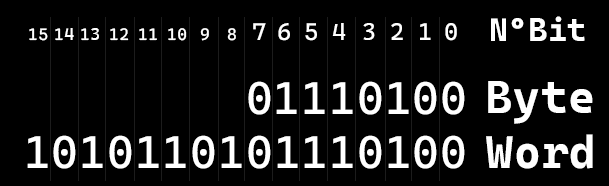
<style>
.page{position:relative;width:609px;height:186px;background:#000000}
.page>*{position:absolute;margin:0}
.t1{font:32.5px "CascadiaCodeRoman-Bold";letter-spacing:0.02em;color:#ffffff}
.t2{font:16.7px "CascadiaCode-Roman";letter-spacing:0.02em;color:#ffffff}
.t3{font:24.2px "CascadiaCode-Roman";letter-spacing:0.02em;color:#ffffff}
.t4{font:45.8px "CascadiaCode-Roman";letter-spacing:0.02em;color:#ffffff}
.t5{font:45.8px "CascadiaCodeRoman-Bold";letter-spacing:0.02em;color:#ffffff}
</style>
<div class="page">
<p class="t1" style="left:491px;top:16px;width:94px;height:25px">NºBit</p>
<p class="t2" style="left:29px;top:28px;width:19px;height:13px">15</p>
<p class="t2" style="left:55px;top:28px;width:19px;height:13px">14</p>
<p class="t2" style="left:81px;top:28px;width:18px;height:13px">13</p>
<p class="t2" style="left:110px;top:28px;width:19px;height:13px">12</p>
<p class="t2" style="left:139px;top:28px;width:18px;height:13px">11</p>
<p class="t2" style="left:168px;top:28px;width:19px;height:13px">10</p>
<p class="t2" style="left:200px;top:28px;width:9px;height:13px">9</p>
<p class="t2" style="left:227px;top:28px;width:9px;height:13px">8</p>
<p class="t3" style="left:253px;top:23px;width:13px;height:17px">7</p>
<p class="t3" style="left:278px;top:23px;width:12px;height:18px">6</p>
<p class="t3" style="left:305px;top:23px;width:12px;height:18px">5</p>
<p class="t3" style="left:332px;top:23px;width:14px;height:17px">4</p>
<p class="t3" style="left:363px;top:23px;width:12px;height:17px">3</p>
<p class="t3" style="left:391px;top:23px;width:12px;height:17px">2</p>
<p class="t3" style="left:420px;top:23px;width:11px;height:17px">1</p>
<p class="t3" style="left:445px;top:23px;width:12px;height:18px">0</p>
<p class="t4" style="left:248px;top:81px;width:217px;height:34px">01110100</p>
<p class="t5" style="left:488px;top:81px;width:105px;height:43px">Byte</p>
<p class="t4" style="left:27px;top:135px;width:438px;height:34px">1010110101110100</p>
<p class="t5" style="left:486px;top:134px;width:107px;height:35px">Word</p>
</div>
